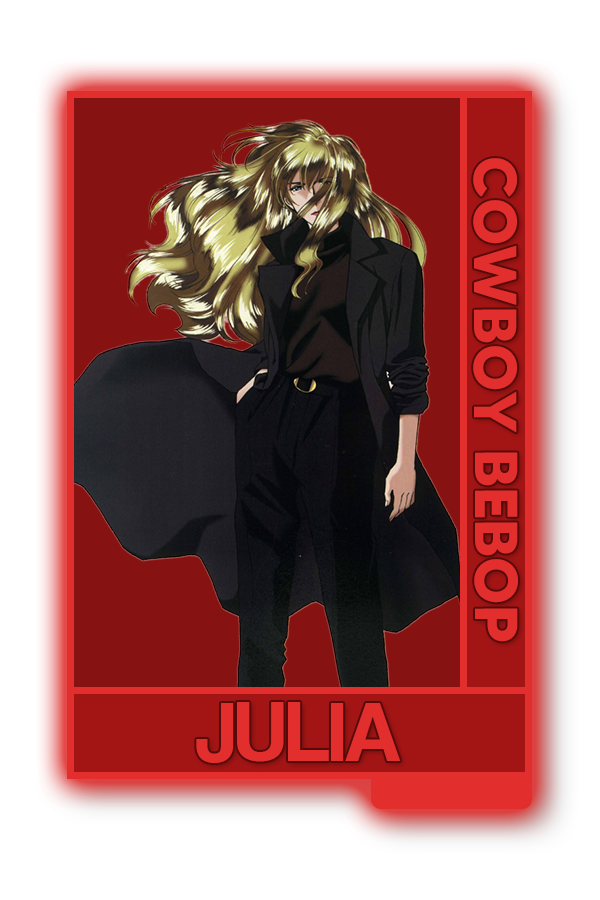
<style>
.page{position:relative;width:600px;height:900px;background:#ffffff}
.page>*{position:absolute;margin:0}
.t1{font:60.5px "MADETOMMY-Bold";color:#e22f2e}
.t2{font:86.6px "CoolveticaRg-Regular";color:#e22f2e}
</style>
<div class="page">
<p class="t1" style="left:473px;top:158px;width:45px;height:484px;rotate:90deg">COWBOY BEBOP</p>
<p class="t2" style="left:196px;top:702px;width:205px;height:61px">JULIA</p>
</div>
